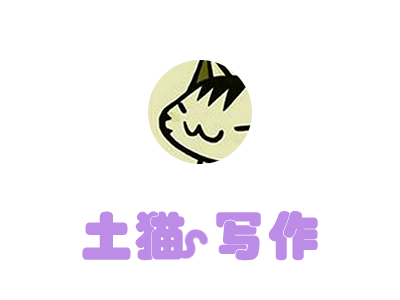
<style>
.page{position:relative;width:400px;height:300px;background:#ffffff}
.page>*{position:absolute;margin:0}
.t1{font:51.3px "STHupo";color:#bd8ce7;font-weight:bold}
</style>
<div class="page">
<p class="t1" style="left:82px;top:211px;width:236px;height:50px">土猫  写作</p>
</div>
